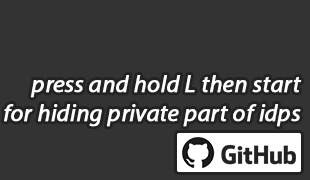
<style>
.page{position:relative;width:310px;height:180px;background:#333333}
.page>*{position:absolute;margin:0}
.t1{font:24px "MyriadPro-It";color:#ffffff;font-weight:bold}
</style>
<div class="page">
<p class="t1" style="left:4px;top:75px;width:298px;height:52px;text-align:right">press and hold L then start<br>for hiding private part of idps</p>
</div>
